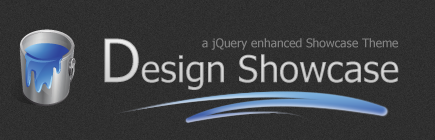
<style>
.page{position:relative;width:435px;height:140px}
.page>*{position:absolute;margin:0}
.t1{font:37px "Tahoma";color:#c7c7c7}
.t2{font:60px "Tahoma";color:#c7c7c7}
.t3{font:12px "Tahoma";color:#828282}
</style>
<div class="page">
<p class="t1" style="left:104px;top:38px;width:295px;height:52px"><span class="t2">D</span>esign Showcase</p>
<p class="t3" style="left:202px;top:38px;width:196px;height:12px">a jQuery enhanced Showcase Theme</p>
</div>
